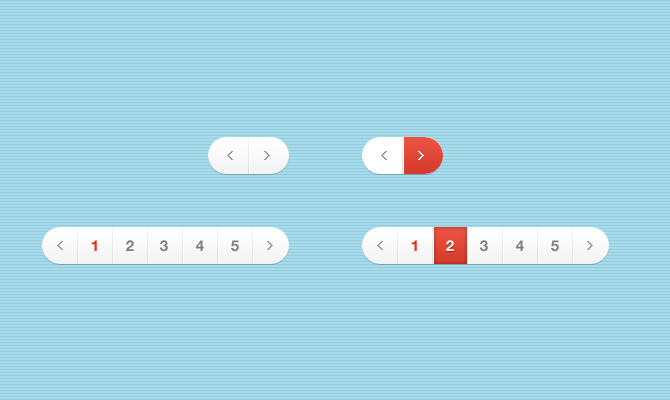
<style>
.page{position:relative;width:670px;height:400px;background:#a2dcef}
.page>*{position:absolute;margin:0}
.t1{font:15px "HelveticaNeue-Bold";color:#e72b18}
.t2{font:15px "HelveticaNeue-Bold";color:#7e7e7e}
.t3{font:15px "HelveticaNeue-Bold";color:#ffffff}
</style>
<div class="page">
<p class="t1" style="left:91px;top:240px;width:6px;height:11px">1</p>
<p class="t2" style="left:126px;top:240px;width:8px;height:11px">2</p>
<p class="t2" style="left:160px;top:240px;width:8px;height:12px">3</p>
<p class="t2" style="left:196px;top:240px;width:8px;height:11px">4</p>
<p class="t2" style="left:231px;top:240px;width:8px;height:12px">5</p>
<p class="t1" style="left:411px;top:240px;width:6px;height:11px">1</p>
<p class="t3" style="left:446px;top:240px;width:8px;height:11px">2</p>
<p class="t2" style="left:480px;top:240px;width:8px;height:12px">3</p>
<p class="t2" style="left:516px;top:240px;width:8px;height:11px">4</p>
<p class="t2" style="left:551px;top:240px;width:8px;height:12px">5</p>
</div>
